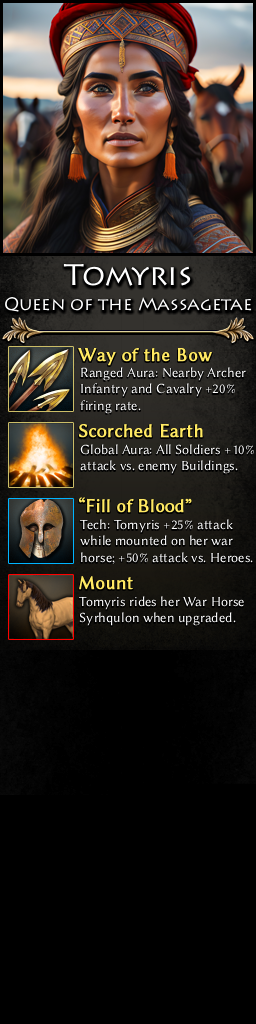
<style>
.page{position:relative;width:256px;height:1024px;background:#000000}
.page>*{position:absolute;margin:0}
.t1{font:18px/25px "Lithos";letter-spacing:-0.005em;color:#ffffff}
.t2{font:30px/25px "Lithos";color:#ffffff}
.t3{font:19px "LinBiolinumO";color:#ffe963;font-weight:bold}
.t4{font:14px "LinBiolinumO";color:#ffffff}
</style>
<div class="page">
<p class="t1" style="left:5px;top:263px;width:247px;height:49px;text-align:center"><span class="t2">Tomyris<br></span>Queen of the Massagetae</p>
<p class="t3" style="left:78px;top:348px;width:134px;height:18px">Way of the Bow</p>
<p class="t4" style="left:80px;top:367px;width:166px;height:47px">Ranged Aura: Nearby Archer <br>Infantry and Cavalry +20% <br>firing rate.</p>
<p class="t3" style="left:79px;top:423px;width:124px;height:15px">Scorched Earth</p>
<p class="t4" style="left:80px;top:444px;width:174px;height:30px">Global Aura: All Soldiers +10%<br>attack vs. enemy Buildings.</p>
<p class="t3" style="left:79px;top:497px;width:113px;height:16px">“Fill of Blood”</p>
<p class="t4" style="left:80px;top:519px;width:173px;height:46px">Tech: Tomyris +25% attack<br>while mounted on her war<br>horse; +50% attack vs. Heroes.</p>
<p class="t3" style="left:79px;top:576px;width:54px;height:14px">Mount</p>
<p class="t4" style="left:79px;top:596px;width:165px;height:30px">Tomyris rides her War Horse <br>Syrhqulon when upgraded.</p>
</div>
